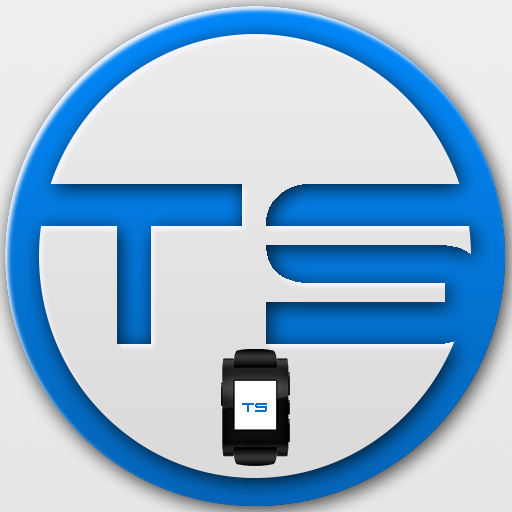
<style>
.page{position:relative;width:512px;height:512px}
.page>*{position:absolute;margin:0}
.t1{font:16px "DodgerCondensed";color:#0270cd}
</style>
<div class="page">
<p class="t1" style="left:242px;top:403px;width:25px;height:9px">TS</p>
</div>
